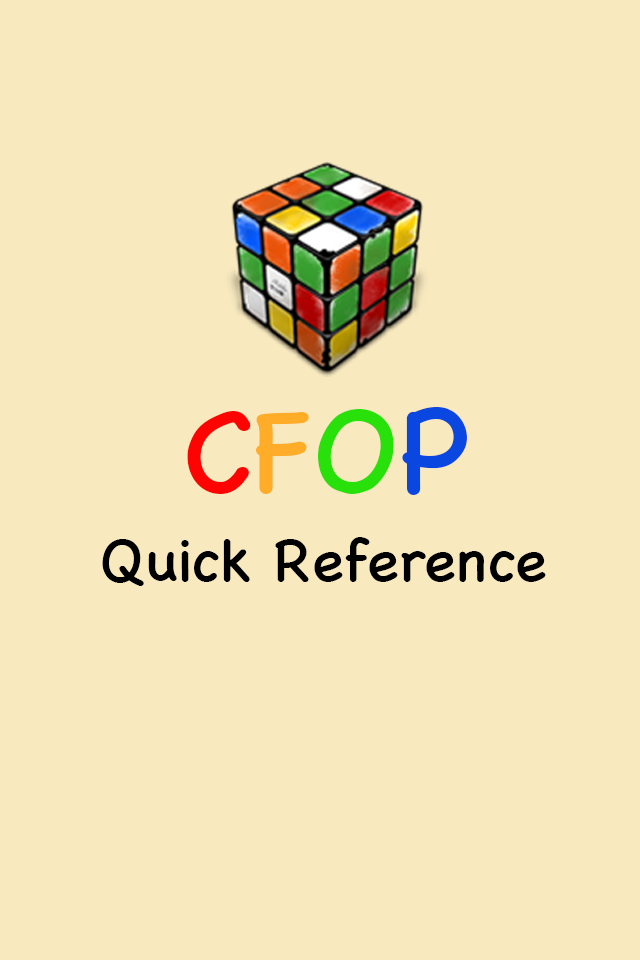
<style>
.page{position:relative;width:640px;height:960px;background:#f8e9bf}
.page>*{position:absolute;margin:0}
.t1{font:120px "ChalkboardSE-Regular";color:#ff0303}
.t2{font:120px "ChalkboardSE-Regular";color:#ffac28}
.t3{font:120px "ChalkboardSE-Regular";color:#28e00a}
.t4{font:120px "ChalkboardSE-Regular";color:#0a46e0}
.t5{font:60px "ChalkboardSE-Regular";color:#000000}
</style>
<div class="page">
<p class="t1" style="left:187px;top:407px;width:280px;height:88px">C<span class="t2">F</span><span class="t3">O</span><span class="t4">P</span></p>
<p class="t5" style="left:102px;top:537px;width:444px;height:49px">Quick Reference</p>
</div>
